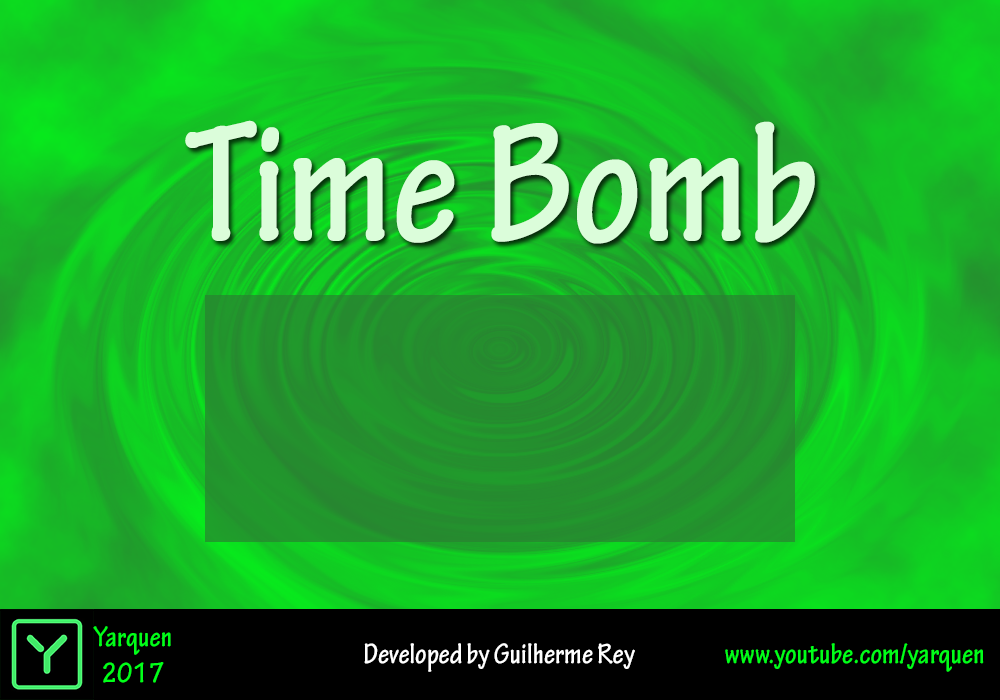
<style>
.page{position:relative;width:1000px;height:700px}
.page>*{position:absolute;margin:0}
.t1{font:180px "TektonPro-BoldCond";color:#dbfdda}
.t2{font:30px "TektonPro-BoldCond";color:#00ff18}
.t3{font:30px "TektonPro-BoldCond";color:#ffffff}
</style>
<div class="page">
<p class="t1" style="left:185px;top:120px;width:630px;height:124px">Time Bomb</p>
<p class="t2" style="left:93px;top:626px;width:78px;height:57px;text-align:center">Yarquen<br>2017</p>
<p class="t3" style="left:364px;top:643px;width:271px;height:29px">Developed by Guilherme Rey</p>
<p class="t2" style="left:725px;top:643px;width:259px;height:29px">www.youtube.com/yarquen</p>
</div>
